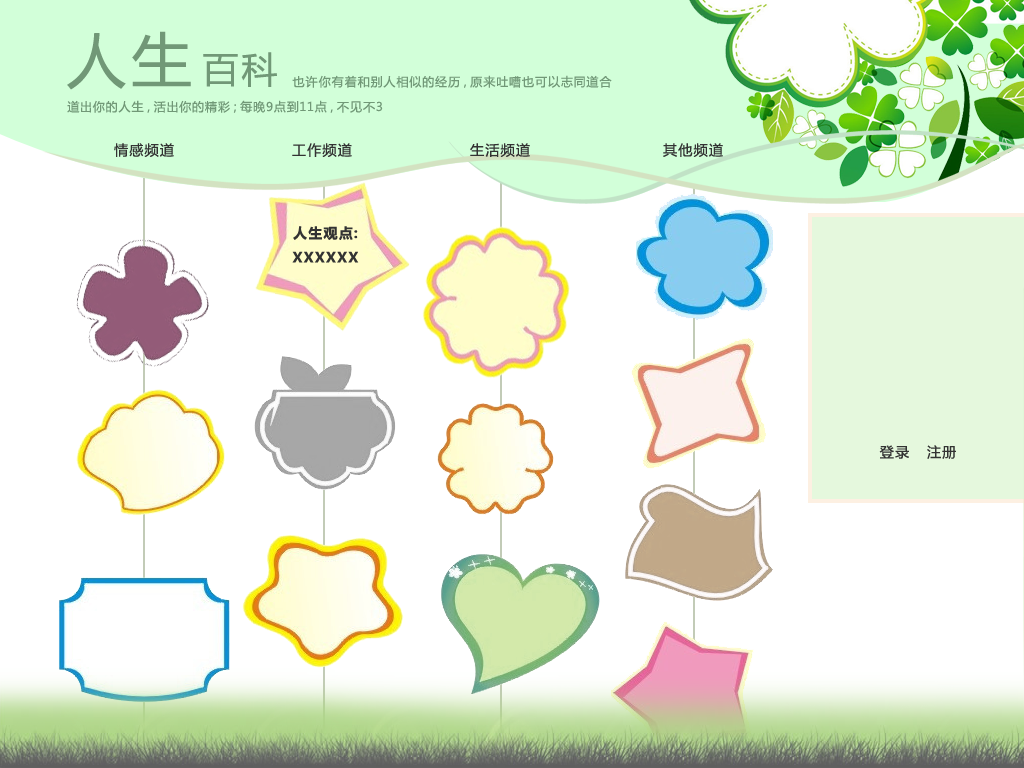
<style>
.page{position:relative;width:1024px;height:768px;background:#ffffff}
.page>*{position:absolute;margin:0}
.t1{font:60px "MicrosoftYaHei";letter-spacing:0.1em;color:#719877}
.t2{font:36px "MicrosoftYaHei";letter-spacing:0.1em;color:#719877}
.t3{font:12px "MicrosoftYaHei";letter-spacing:0.1em;color:#719877}
.t4{font:14px "MicrosoftYaHei";letter-spacing:0.1em;color:#333333}
</style>
<div class="page">
<p class="t1" style="left:67px;top:31px;width:124px;height:59px">人生</p>
<p class="t2" style="left:203px;top:52px;width:74px;height:35px">百科</p>
<p class="t3" style="left:292px;top:75px;width:320px;height:13px">也许你有着和别人相似的经历，原来吐嘈也可以志同道合</p>
<p class="t3" style="left:67px;top:100px;width:316px;height:13px">道出你的人生，活出你的精彩；每晚9点到11点，不见不3</p>
<p class="t4" style="left:114px;top:143px;width:60px;height:14px">情感频道</p>
<p class="t4" style="left:292px;top:143px;width:60px;height:14px">工作频道</p>
<p class="t4" style="left:470px;top:143px;width:60px;height:14px">生活频道</p>
<p class="t4" style="left:663px;top:143px;width:60px;height:14px">其他频道</p>
<p class="t4" style="left:292px;top:226px;width:67px;height:37px;text-align:center">人生观点:<br>XXXXXX</p>
<p class="t4" style="left:879px;top:445px;width:77px;height:14px">登录   注册</p>
</div>
